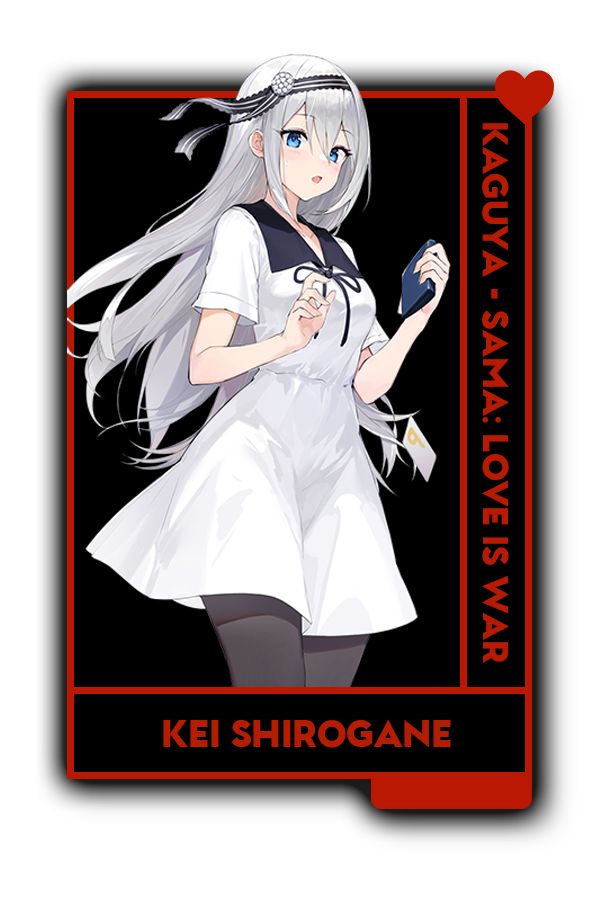
<style>
.page{position:relative;width:600px;height:900px;background:#000000}
.page>*{position:absolute;margin:0}
.t1{font:34px "GarnetCapitalsBlack-Regular";color:#b52616}
.t2{font:35.7px "GarnetCapitalsBlack-Regular";color:#b22818}
</style>
<div class="page">
<p class="t1" style="left:482px;top:123px;width:27px;height:540px;rotate:90deg">Kaguya - Sama: Love is war</p>
<p class="t2" style="left:163px;top:720px;width:288px;height:28px">KEI SHIROGANE</p>
</div>
